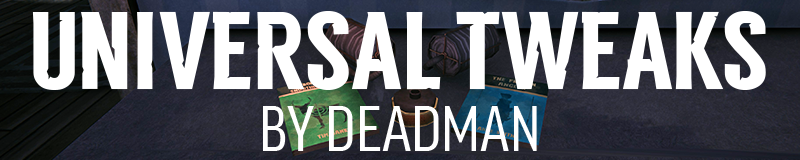
<style>
.page{position:relative;width:800px;height:160px;background:#ffffff}
.page>*{position:absolute;margin:0}
.t1{font:110px "TLD_Headline_One_Test1.5";color:#ffffff}
.t2{font:62px "FFGoodProCond-News";color:#ffffff}
</style>
<div class="page">
<p class="t1" style="left:32px;top:11px;width:734px;height:79px">UNIVERSAL TWEAKS</p>
<p class="t2" style="left:263px;top:106px;width:274px;height:45px">BY DEADMAN</p>
</div>
